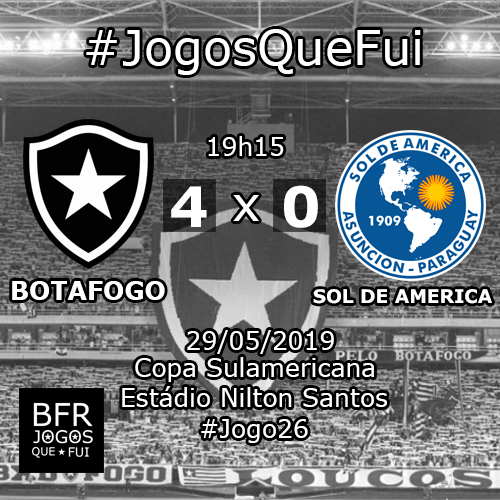
<style>
.page{position:relative;width:500px;height:500px}
.page>*{position:absolute;margin:0}
.t1{font:48px "Verdana";color:#ffffff}
.t2{font:25px "Verdana";color:#ffffff}
.t3{font:55.8px "Verdana-Bold";color:#ffffff}
.t4{font:25px "Verdana-Bold";color:#ffffff}
.t5{font:18.8px "Verdana-Bold";color:#ffffff}
</style>
<div class="page">
<p class="t1" style="left:86px;top:29px;width:335px;height:46px">#JogosQueFui</p>
<p class="t2" style="left:208px;top:136px;width:76px;height:20px">19h15</p>
<p class="t3" style="left:284px;top:185px;width:34px;height:43px">0</p>
<p class="t3" style="left:171px;top:186px;width:36px;height:41px">4</p>
<p class="t1" style="left:233px;top:195px;width:26px;height:26px">x</p>
<p class="t4" style="left:12px;top:281px;width:153px;height:19px">BOTAFOGO</p>
<p class="t5" style="left:313px;top:289px;width:179px;height:15px">SOL DE AMERICA</p>
<p class="t2" style="left:187px;top:330px;width:147px;height:24px">29/05/2019</p>
<p class="t2" style="left:135px;top:357px;width:239px;height:25px">Copa Sulamericana</p>
<p class="t2" style="left:122px;top:386px;width:265px;height:21px">Estádio Nilton Santos</p>
<p class="t2" style="left:201px;top:419px;width:107px;height:24px">#Jogo26</p>
</div>
